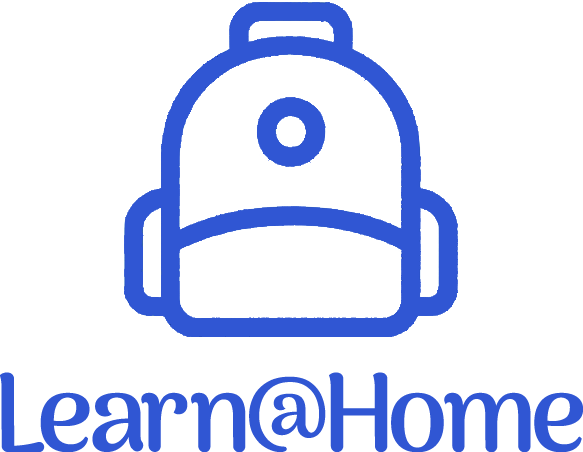
<style>
.page{position:relative;width:583px;height:452px;background:#ffffff}
.page>*{position:absolute;margin:0}
.t1{font:80px "Quasia";color:#3056d3}
</style>
<div class="page">
<p class="t1" style="left:0px;top:372px;width:583px;height:81px">Learn@Home</p>
</div>
